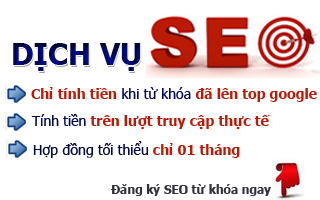
<style>
.page{position:relative;width:320px;height:200px;background:#ffffff}
.page>*{position:absolute;margin:0}
.t1{font:30px "Tahoma-Bold"}
.t2{font:14px "Tahoma-Bold";color:#ba1b06}
.t3{font:14px "Tahoma";color:#020757}
.t4{font:14px "Tahoma-Bold";color:#b91a05}
.t5{font:14px "Tahoma";color:#010645}
.t6{font:12px "Tahoma-Bold";color:#303139}
</style>
<div class="page">
<p class="t1" style="left:13px;top:43px;width:128px;height:28px">DỊCH VỤ</p>
<p class="t2" style="left:31px;top:87px;width:286px;height:15px">Chỉ tính tiền<span class="t3"> khi từ khóa </span>đã lên top google</p>
<p class="t4" style="left:31px;top:114px;width:240px;height:15px"><span class="t3">Tính tiền </span>trên lượt truy cập thực tế</p>
<p class="t5" style="left:33px;top:141px;width:207px;height:17px">Hợp đồng tối thiểu <span class="t2">chỉ 01 tháng</span></p>
<p class="t6" style="left:111px;top:184px;width:160px;height:12px">Đăng ký SEO từ khóa ngay</p>
</div>
